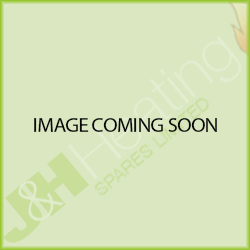
<style>
.page{position:relative;width:250px;height:250px;background:#dae7c1}
.page>*{position:absolute;margin:0}
.t1{font:20.8px "MyriadPro-Regular";letter-spacing:-0.025em;color:#0a0a0a}
.t2{font:60.1px "HelveticaNeue-CondensedBlack";letter-spacing:-0.02em;color:#c8de99;scale:1.67 1}
.t3{font:60.5px "HelveticaNeue-Thin";color:#e4edd1}
</style>
<div class="page">
<p class="t1" style="left:34px;top:118px;width:183px;height:14px">IMAGE COMING SOON</p>
<p class="t2" style="left:3px;top:152px;width:86px;height:91px;rotate:-40deg">JH</p>
<p class="t3" style="left:17px;top:178px;width:48px;height:45px;rotate:-40deg">&amp;</p>
</div>
